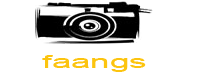
<style>
.page{position:relative;width:206px;height:72px;background:#ffffff}
.page>*{position:absolute;margin:0}
.t1{font:17.6px "ArialMT";color:#fcc40f;scale:1.98 1}
</style>
<div class="page">
<p class="t1" style="left:42px;top:55px;width:104px;height:17px">faangs</p>
</div>
